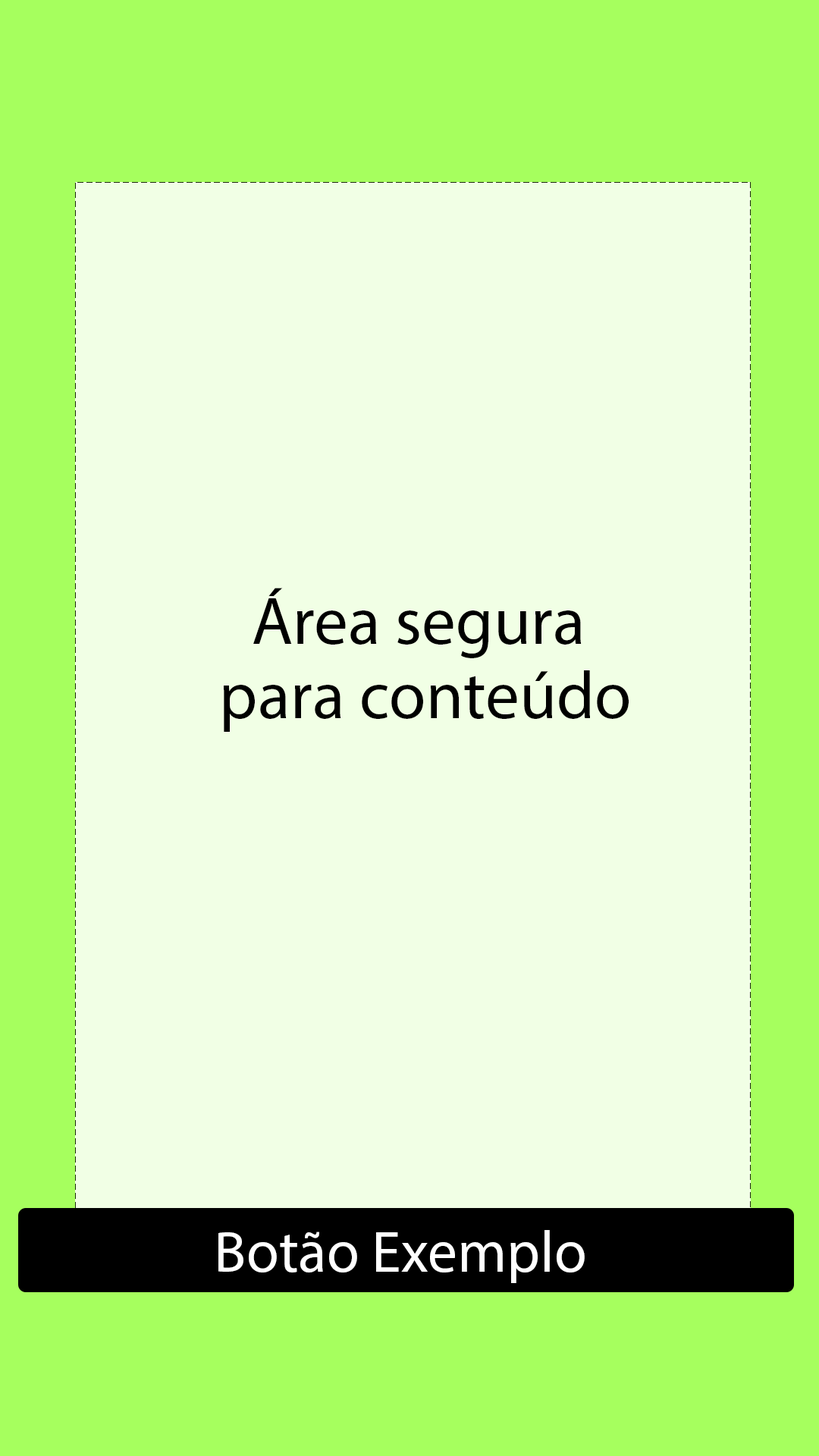
<style>
.page{position:relative;width:819px;height:1456px;background:#f1ffe5}
.page>*{position:absolute;margin:0}
.t1{font:67.5px/74.2px "MyriadPro-Regular";color:#000000}
.t2{font:59px "MyriadPro-Regular";color:#ffffff}
</style>
<div class="page">
<p class="t1" style="left:224px;top:588px;width:405px;height:144px;text-align:center">Área segura <br>para conteúdo</p>
<p class="t2" style="left:218px;top:1230px;width:367px;height:53px">Botão Exemplo</p>
</div>
